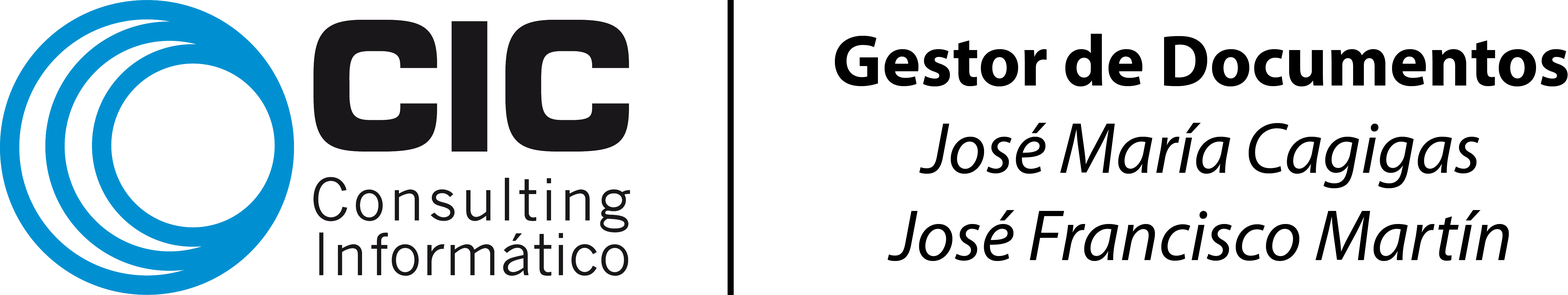
<style>
.page{position:relative;width:1568px;height:295px;background:#ffffff}
.page>*{position:absolute;margin:0}
.t1{font:72.7px "MyriadPro-It";color:#000000}
.t2{font:72.7px "MyriadPro-Bold";color:#000000}
</style>
<div class="page">
<p class="t1" style="left:835px;top:34px;width:733px;height:227px;text-align:center"><span class="t2">Gestor de Documentos<br></span>José María Cagigas<br>José Francisco Martín</p>
</div>
